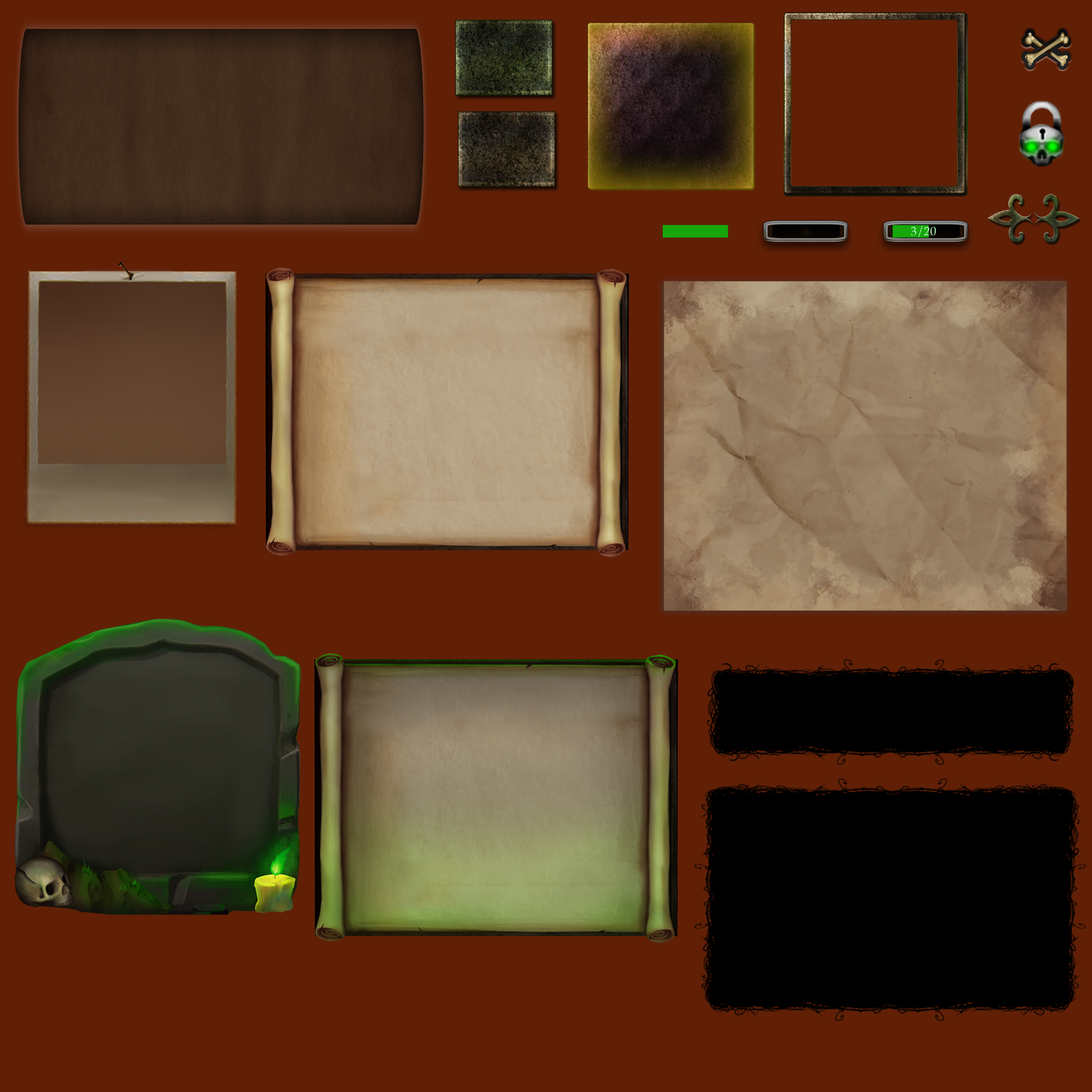
<style>
.page{position:relative;width:1092px;height:1092px;background:#612006}
.page>*{position:absolute;margin:0}
.t1{font:13.3px "Nosferatu";color:#b3ffbc;text-transform:uppercase}
</style>
<div class="page">
<p class="t1" style="left:911px;top:226px;width:25px;height:11px">3/20</p>
</div>
